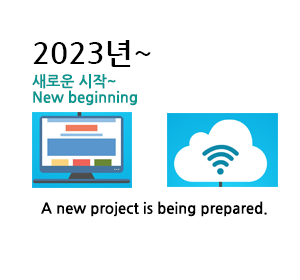
<style>
.page{position:relative;width:300px;height:280px;background:#ffffff}
.page>*{position:absolute;margin:0}
.t1{font:30px "NanumGothicBold";color:#000000}
.t2{font:15px/16px "NanumGothicBold";color:#0a978f}
.t3{font:15px "NanumGothicBold";color:#000000}
</style>
<div class="page">
<p class="t1" style="left:33px;top:40px;width:118px;height:27px">2023년~</p>
<p class="t2" style="left:32px;top:74px;width:105px;height:32px">새로운 시작~<br>New beginning</p>
<p class="t3" style="left:41px;top:201px;width:226px;height:16px">A new project is being prepared.</p>
</div>
